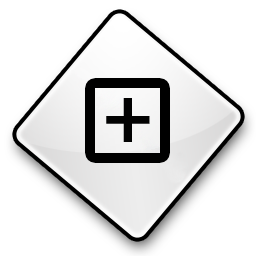
<style>
.page{position:relative;width:256px;height:256px;background:#ffffff}
.page>*{position:absolute;margin:0}
.t1{font:82.5px "MyriadPro-Bold";letter-spacing:0.005em;color:#020202}
</style>
<div class="page">
<p class="t1" style="left:106px;top:98px;width:44px;height:44px">+</p>
</div>
